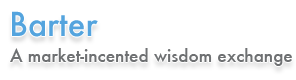
<style>
.page{position:relative;width:296px;height:80px;background:#ffffff}
.page>*{position:absolute;margin:0}
.t1{font:32px "Futura-Medium";color:#54a4de}
.t2{font:17px "Futura-Medium";color:#6e7072}
</style>
<div class="page">
<p class="t1" style="left:12px;top:11px;width:86px;height:26px">Barter</p>
<p class="t2" style="left:10px;top:48px;width:282px;height:18px">A market-incented wisdom exchange</p>
</div>
